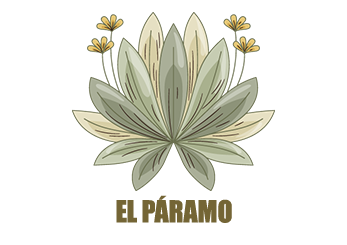
<style>
.page{position:relative;width:347px;height:245px;background:#ffffff}
.page>*{position:absolute;margin:0}
.t1{font:28px "Impact";letter-spacing:-0.015em;color:#746535}
</style>
<div class="page">
<p class="t1" style="left:116px;top:195px;width:116px;height:28px">EL PÁRAMO</p>
</div>
